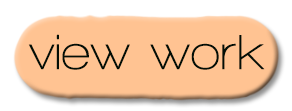
<style>
.page{position:relative;width:292px;height:111px;background:#ffc392}
.page>*{position:absolute;margin:0}
.t1{font:50.2px "WalkwaySemiBold";color:#020e06;scale:1.06 1}
</style>
<div class="page">
<p class="t1" style="left:28px;top:34px;width:237px;height:36px">view work</p>
</div>
